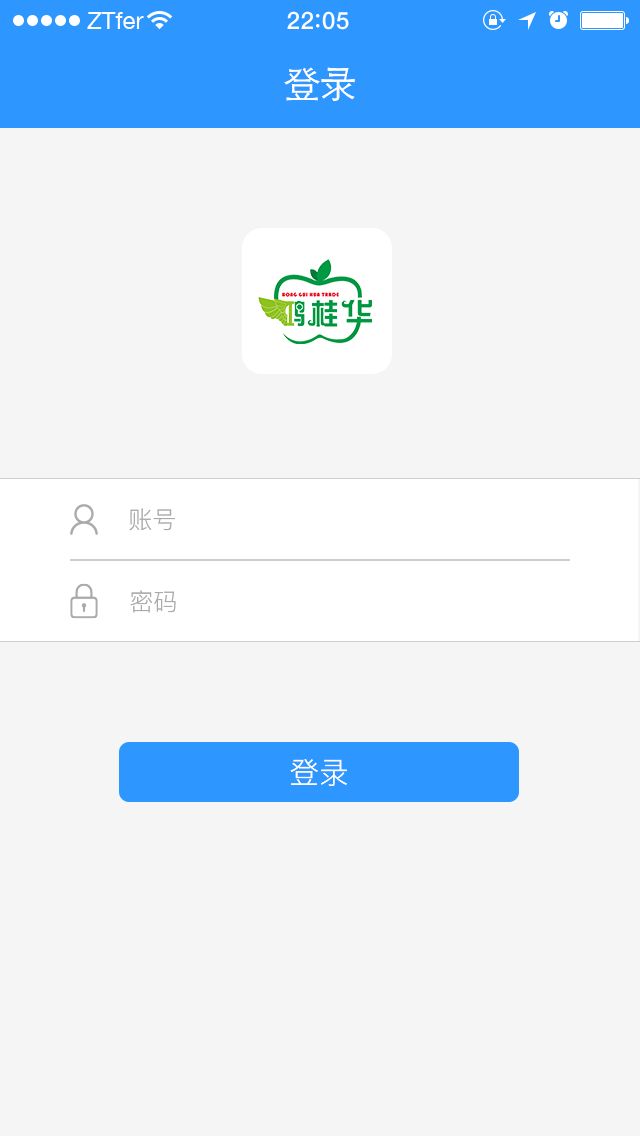
<style>
.page{position:relative;width:640px;height:1136px;background:#f5f5f5}
.page>*{position:absolute;margin:0}
.t1{font:24px "HelveticaNeue";color:#ffffff}
.t2{font:24px "HelveticaNeue-Medium";letter-spacing:0.03em;color:#ffffff}
.t3{font:36px "FZZDXJW--GB1-0";color:#ffffff}
.t4{font:24px "PingFang-SC-Regular";color:#aaaaaa}
.t5{font:30px "PingFang-SC-Regular";color:#ffffff}
</style>
<div class="page">
<p class="t1" style="left:87px;top:12px;width:57px;height:17px">ZTfer</p>
<p class="t2" style="left:287px;top:11px;width:62px;height:19px">22 05</p>
<p class="t3" style="left:284px;top:67px;width:71px;height:34px">登录</p>
<p class="t4" style="left:129px;top:508px;width:46px;height:23px">账号</p>
<p class="t4" style="left:130px;top:590px;width:46px;height:23px">密码</p>
<p class="t5" style="left:290px;top:759px;width:57px;height:27px">登录</p>
</div>
